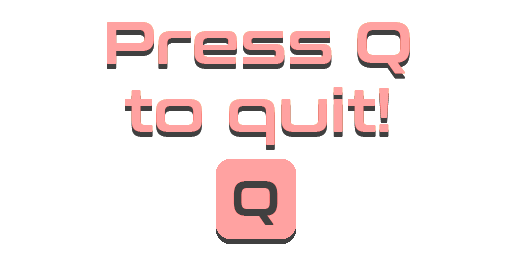
<style>
.page{position:relative;width:512px;height:256px;background:#ffffff}
.page>*{position:absolute;margin:0}
.t1{font:60px/100px "ConthraxSb-Regular";color:#ffa2a1}
.t2{font:50px "ConthraxSb-Regular";color:#404040}
</style>
<div class="page">
<p class="t1" style="left:107px;top:22px;width:303px;height:123px;text-align:center">Press Q<br>to quit!</p>
<p class="t2" style="left:233px;top:181px;width:45px;height:44px">Q</p>
</div>
